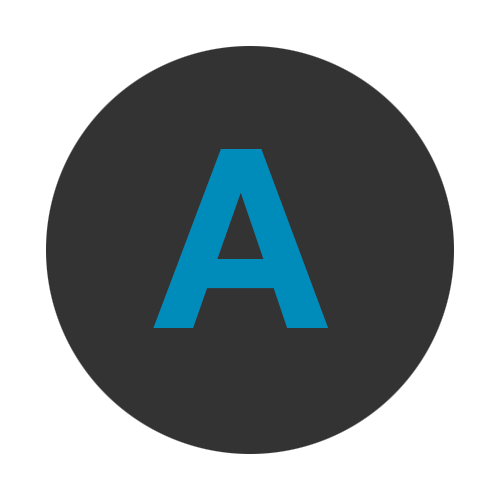
<style>
.page{position:relative;width:500px;height:500px;background:#ffffff}
.page>*{position:absolute;margin:0}
.t1{font:250px "HelveticaNeue-Bold";color:#008cba}
</style>
<div class="page">
<p class="t1" style="left:153px;top:149px;width:175px;height:179px">A</p>
</div>
